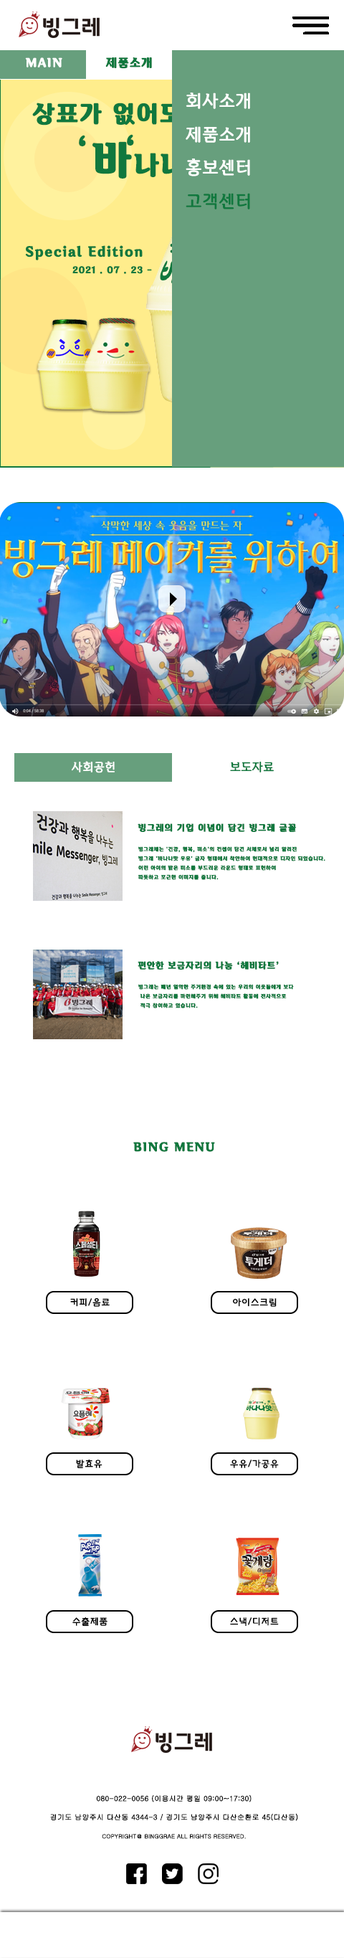
<style>
.page{position:relative;width:344px;height:1958px;background:#ffffff}
.page>*{position:absolute;margin:0}
.t1{font:11.5px "BinggraeII-Bold";letter-spacing:0.06em;color:#ffffff;text-transform:uppercase;font-weight:bold}
.t2{font:11.5px "BinggraeII-Bold";letter-spacing:0.06em;color:#10783e;text-transform:uppercase;font-weight:bold}
.t3{font:17.2px "BinggraeII";color:#ffffff;text-transform:uppercase;font-weight:bold}
.t4{font:17.2px "BinggraeII";color:#10783e;text-transform:uppercase;font-weight:bold}
.t5{font:11.5px "BinggraeII";color:#ffffff;text-transform:uppercase;font-weight:bold}
.t6{font:11.5px "BinggraeII";color:#10783e;text-transform:uppercase;font-weight:bold}
.t7{font:8.6px "BinggraeII-Bold";letter-spacing:0.06em;color:#10783e;text-transform:uppercase;font-weight:bold}
.t8{font:5px/9.3px "BinggraeII-Bold";letter-spacing:0.06em;color:#10783e;text-transform:uppercase;font-weight:bold}
.t9{font:9px "BinggraeMelona";letter-spacing:0.06em;color:#000000;text-transform:uppercase;font-weight:bold}
.t10{font:7.2px/9.3px "Gulim";color:#000000;text-transform:uppercase;font-weight:bold}
.t11{font:5.7px/9.3px "Gulim";color:#000000;text-transform:uppercase;font-weight:bold}
</style>
<div class="page">
<p class="t1" style="left:25px;top:57px;width:37px;height:10px">main</p>
<p class="t2" style="left:105px;top:57px;width:47px;height:12px">제품소개</p>
<p class="t3" style="left:186px;top:93px;width:64px;height:16px">회사소개</p>
<p class="t3" style="left:186px;top:126px;width:64px;height:17px">제품소개</p>
<p class="t3" style="left:186px;top:158px;width:64px;height:18px">홍보센터</p>
<p class="t4" style="left:186px;top:193px;width:64px;height:16px">고객센터</p>
<p class="t5" style="left:72px;top:761px;width:43px;height:12px">사회공헌</p>
<p class="t6" style="left:230px;top:762px;width:44px;height:10px">보도자료</p>
<p class="t7" style="left:138px;top:823px;width:159px;height:9px">빙그레의 기업 이념이 담긴 빙그레 글꼴</p>
<p class="t8" style="left:138px;top:846px;width:188px;height:34px">빙그레체는 '건강, 행복, 미소'의 컨셉이 담긴 서체로서 널리 알려진 <br>빙그레 '바나나맛 우유' 글자 형태에서 착안하여 현대적으로 디자인 되었습니다.<br>어린 아이의 밝은 미소를 부드러운 라운드 형태로 표현하여<br>따뜻하고 포근한 이미지를 줍니다.</p>
<p class="t7" style="left:138px;top:961px;width:141px;height:8px">편안한 보금자리의 나눔 ‘헤비타트’</p>
<p class="t8" style="left:138px;top:984px;width:156px;height:24px">빙그레는 매년 열악한 주거환경 속에 있는 우리의 이웃들에게 보다<br> 나은 보금자리를 마련해주기 위해 해비타트 활동에 전사적으로<br> 적극 참여하고 있습니다.</p>
<p class="t2" style="left:133px;top:1142px;width:82px;height:10px">bing menu</p>
<p class="t9" style="left:70px;top:1298px;width:40px;height:8px">커피/음료</p>
<p class="t9" style="left:233px;top:1298px;width:44px;height:8px">아이스크림</p>
<p class="t9" style="left:76px;top:1459px;width:27px;height:9px">발효유</p>
<p class="t9" style="left:230px;top:1459px;width:49px;height:10px">우유/가공유</p>
<p class="t9" style="left:72px;top:1617px;width:36px;height:9px">수출제품</p>
<p class="t9" style="left:230px;top:1617px;width:49px;height:9px">스낵/디저트</p>
<p class="t10" style="left:50px;top:1794px;width:248px;height:45px;text-align:center">080-022-0056 (이용시간 평일 09:00~17:30)<br><br>경기도 남양주시 다산동 4344-3 / 경기도 남양주시 다산순환로 45(다산동)<br><span class="t11"><br>copyright＠ Binggrae all rights reserved.</span></p>
</div>
